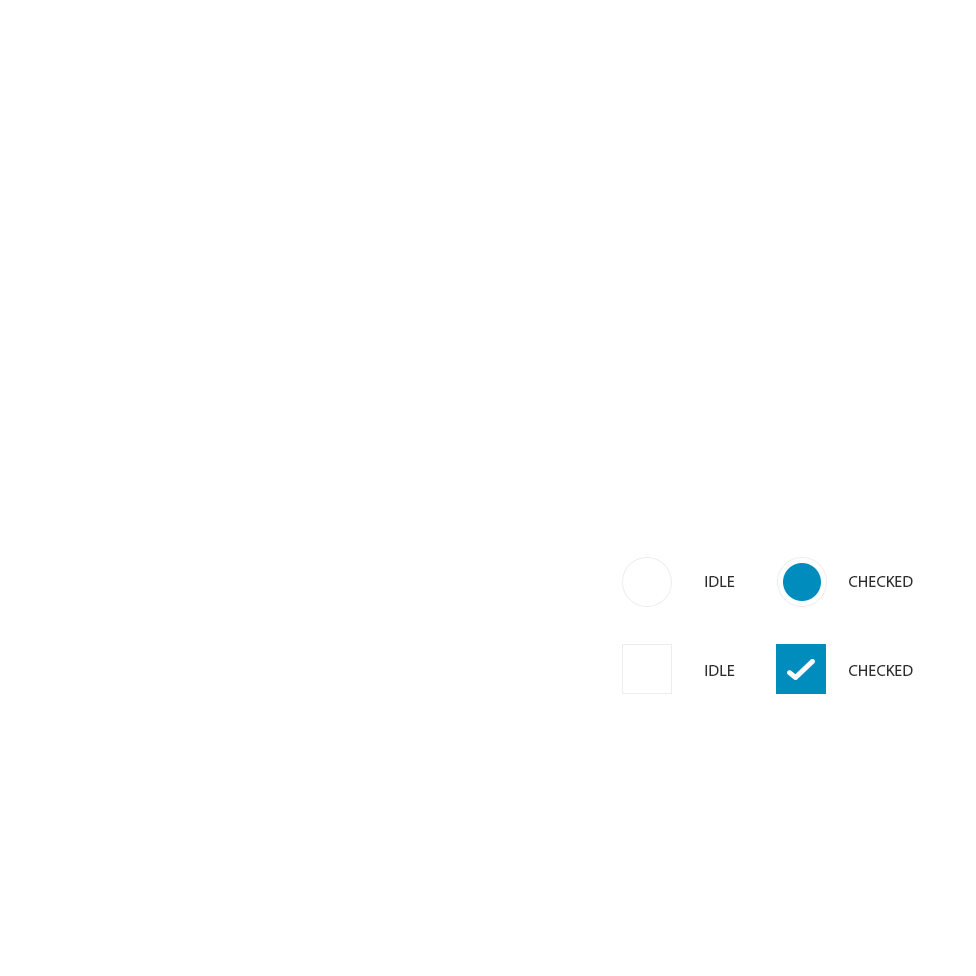
<style>
.page{position:relative;width:976px;height:976px;background:#ffffff}
.page>*{position:absolute;margin:0}
.t1{font:16px "MyriadPro-Regular";letter-spacing:0.01em;color:#2d2d2d}
</style>
<div class="page">
<p class="t1" style="left:705px;top:576px;width:30px;height:11px">IDLE</p>
<p class="t1" style="left:849px;top:576px;width:64px;height:11px">CHECKED</p>
<p class="t1" style="left:705px;top:665px;width:30px;height:11px">IDLE</p>
<p class="t1" style="left:849px;top:665px;width:64px;height:11px">CHECKED</p>
</div>
